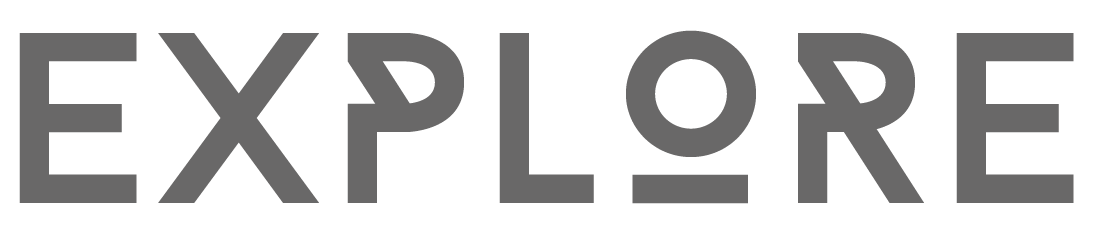
<style>
.page{position:relative;width:1115px;height:247px;background:#ffffff}
.page>*{position:absolute;margin:0}
.t1{font:242.5px "BaronNeue";letter-spacing:0.025em;color:#696868;scale:1.03 1}
</style>
<div class="page">
<p class="t1" style="left:19px;top:30px;width:1055px;height:174px">EXPLORE</p>
</div>
